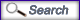
<style>
.page{position:relative;width:80px;height:20px;background:#ffffff}
.page>*{position:absolute;margin:0}
.t1{font:12px "ArialMT";color:#666666;font-weight:bold;font-style:italic}
</style>
<div class="page">
<p class="t1" style="left:29px;top:5px;width:40px;height:10px">Search</p>
<p class="t1" style="left:29px;top:5px;width:40px;height:10px">Search</p>
</div>
